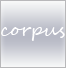
<style>
.page{position:relative;width:66px;height:68px}
.page>*{position:absolute;margin:0}
.t1{font:18.7px "SegoeScript";color:#ffffff}
</style>
<div class="page">
<p class="t1" style="left:1px;top:27px;width:64px;height:14px">corpus</p>
</div>
